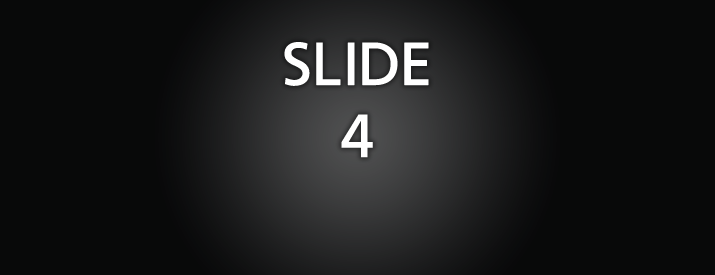
<style>
.page{position:relative;width:715px;height:275px;background:#080909}
.page>*{position:absolute;margin:0}
.t1{font:60px "FrutigerLT-Roman";color:#ffffff;font-weight:bold}
</style>
<div class="page">
<p class="t1" style="left:284px;top:42px;width:145px;height:116px;text-align:center">SLIDE<br>4</p>
</div>
